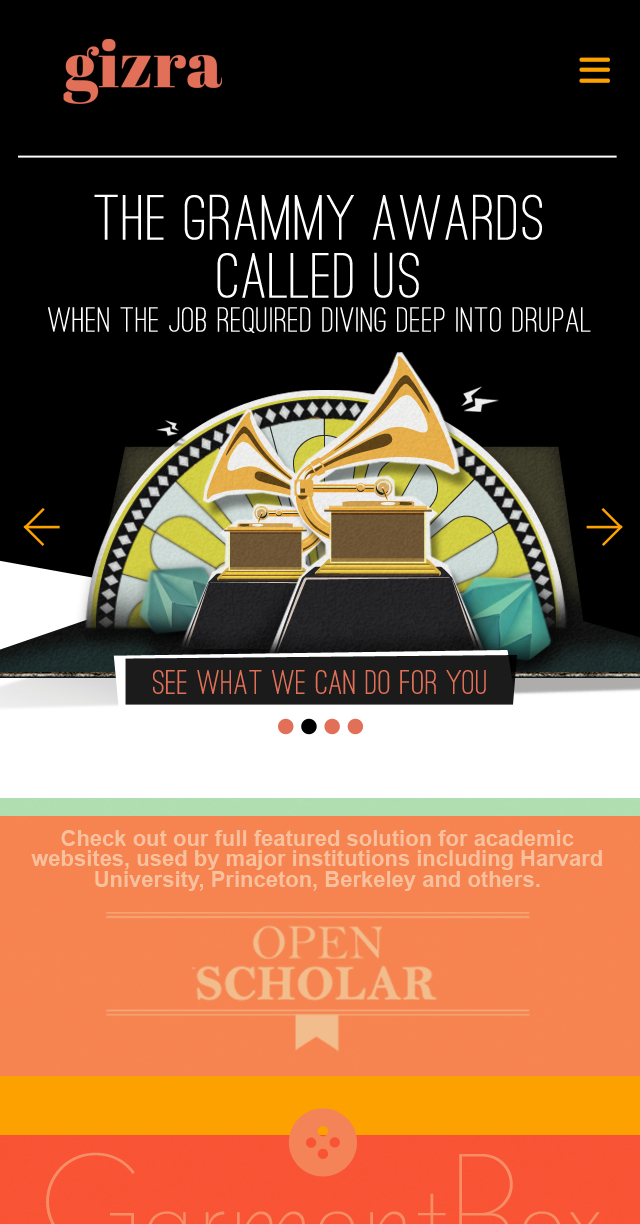
<style>
.page{position:relative;width:640px;height:1224px;background:#000000}
.page>*{position:absolute;margin:0}
.t1{font:36px/34px "OstrichSans-Medium";color:#ffffff;font-weight:bold}
.t2{font:66px/58px "OstrichSans-Medium";color:#ffffff;font-weight:bold}
.t3{font:35.1px "OstrichSans-Medium";color:#e27058;font-weight:bold}
.t4{font:22px/20.4px "Arial-BoldMT";color:#f7c19d}
</style>
<div class="page">
<p class="t1" style="left:48px;top:194px;width:543px;height:139px;text-align:center"><span class="t2">The GRAMMY Awards<br>called us<br></span>When the job required diving deep into Drupal</p>
<p class="t3" style="left:153px;top:670px;width:333px;height:24px">see what we can do for you</p>
<p class="t4" style="left:31px;top:830px;width:571px;height:61px;text-align:center">Check out our full featured solution for academic websites, used by major institutions including Harvard University, Princeton, Berkeley and others.</p>
</div>
